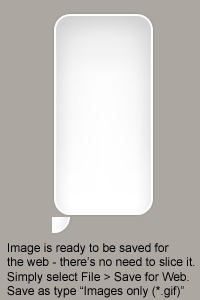
<style>
.page{position:relative;width:200px;height:300px;background:#aca8a1}
.page>*{position:absolute;margin:0}
.t1{font:12px "ArialMT";color:#000000}
</style>
<div class="page">
<p class="t1" style="left:7px;top:243px;width:188px;height:55px">Image is ready to be saved for <br>the web - there’s no need to slice it.<br>Simply select File &gt; Save for Web. <br>Save as type “Images only (*.gif)”</p>
</div>
